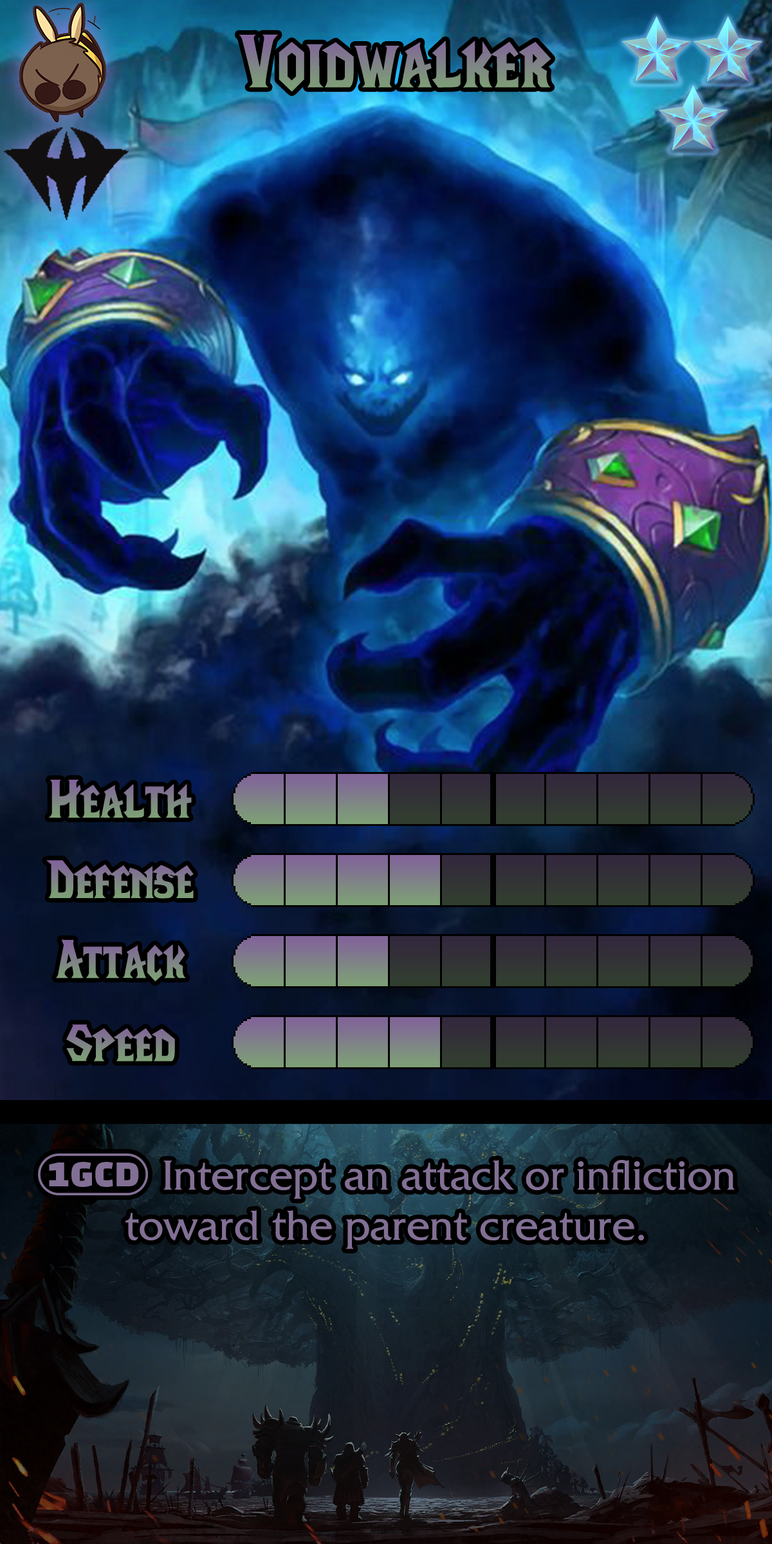
<style>
.page{position:relative;width:772px;height:1544px}
.page>*{position:absolute;margin:0}
.t1{font:128.7px "LifeCraft";color:#7f8585}
.t2{font:92.7px "LifeCraft"}
.t3{font:92.7px "LifeCraft";color:#7f8486}
.t4{font:75.3px "FrizQuadrataStd";color:#817094}
.t5{font:75.3px "stoogedings-Regular";color:#817094}
</style>
<div class="page">
<p class="t1" style="left:239px;top:34px;width:312px;height:58px">Voidwalker</p>
<p class="t2" style="left:49px;top:780px;width:143px;height:38px">Health</p>
<p class="t2" style="left:46px;top:860px;width:148px;height:39px">Defense</p>
<p class="t3" style="left:56px;top:939px;width:130px;height:43px">Attack</p>
<p class="t2" style="left:66px;top:1024px;width:109px;height:38px">Speed</p>
<p class="t4" style="left:38px;top:1154px;width:697px;height:96px"><span class="t5">(1GCD)</span> Intercept an attack or infliction toward the parent creature.</p>
</div>
